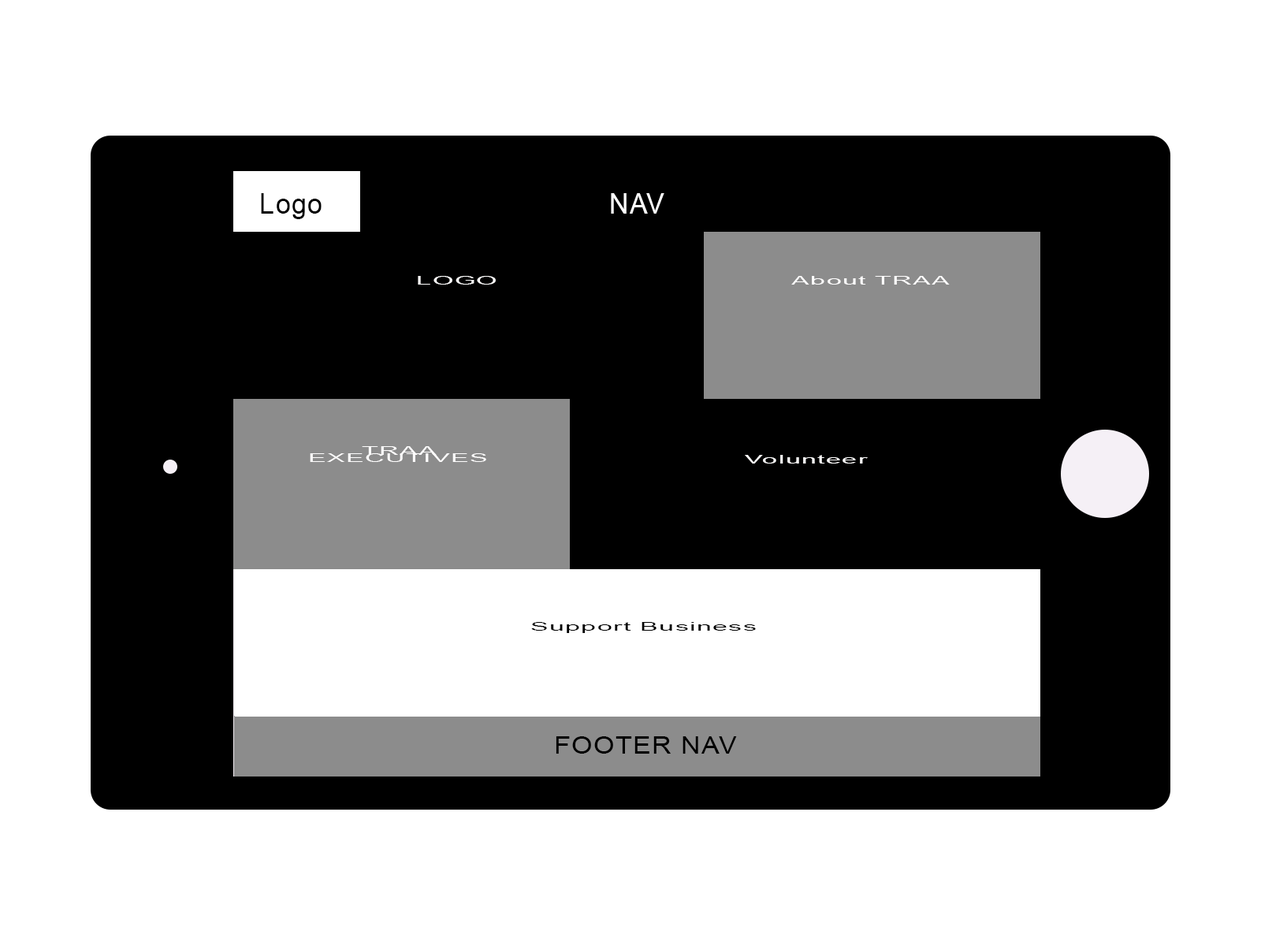
<style>
.page{position:relative;width:1261px;height:946px;background:#ffffff}
.page>*{position:absolute;margin:0}
.t1{font:28.4px "ArialMT";letter-spacing:0.04em;color:#000000;scale:0.95 1}
.t2{font:28.4px "ArialMT";letter-spacing:0.04em;color:#ffffff;scale:0.95 1}
.t3{font:11.7px "ArialMT";letter-spacing:0.04em;color:#fffefe;scale:2.28 1}
.t4{font:11.7px "ArialMT";letter-spacing:0.04em;color:#000000;scale:2.28 1}
.t5{font:24.3px "ArialMT";letter-spacing:0.04em;color:#000000;scale:1.11 1}
</style>
<div class="page">
<p class="t1" style="left:261px;top:193px;width:61px;height:26px">Logo</p>
<p class="t2" style="left:611px;top:193px;width:53px;height:21px">NAV</p>
<p class="t3" style="left:418px;top:276px;width:78px;height:8px">LOGO</p>
<p class="t3" style="left:791px;top:276px;width:159px;height:8px">About TRAA</p>
<p class="t3" style="left:310px;top:446px;width:176px;height:16px">TRAA EXECUTIVES</p>
<p class="t3" style="left:745px;top:455px;width:123px;height:8px">Volunteer</p>
<p class="t4" style="left:531px;top:622px;width:225px;height:11px">Support Business</p>
<p class="t5" style="left:556px;top:736px;width:181px;height:17px">FOOTER NAV</p>
</div>
